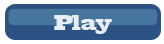
<style>
.page{position:relative;width:164px;height:44px;background:#2c5283}
.page>*{position:absolute;margin:0}
.t1{font:22.1px "Playbill";letter-spacing:-0.025em;color:#f7f8fc;scale:3.03 1}
</style>
<div class="page">
<p class="t1" style="left:54px;top:15px;width:58px;height:19px;opacity:0.92">Play</p>
</div>
